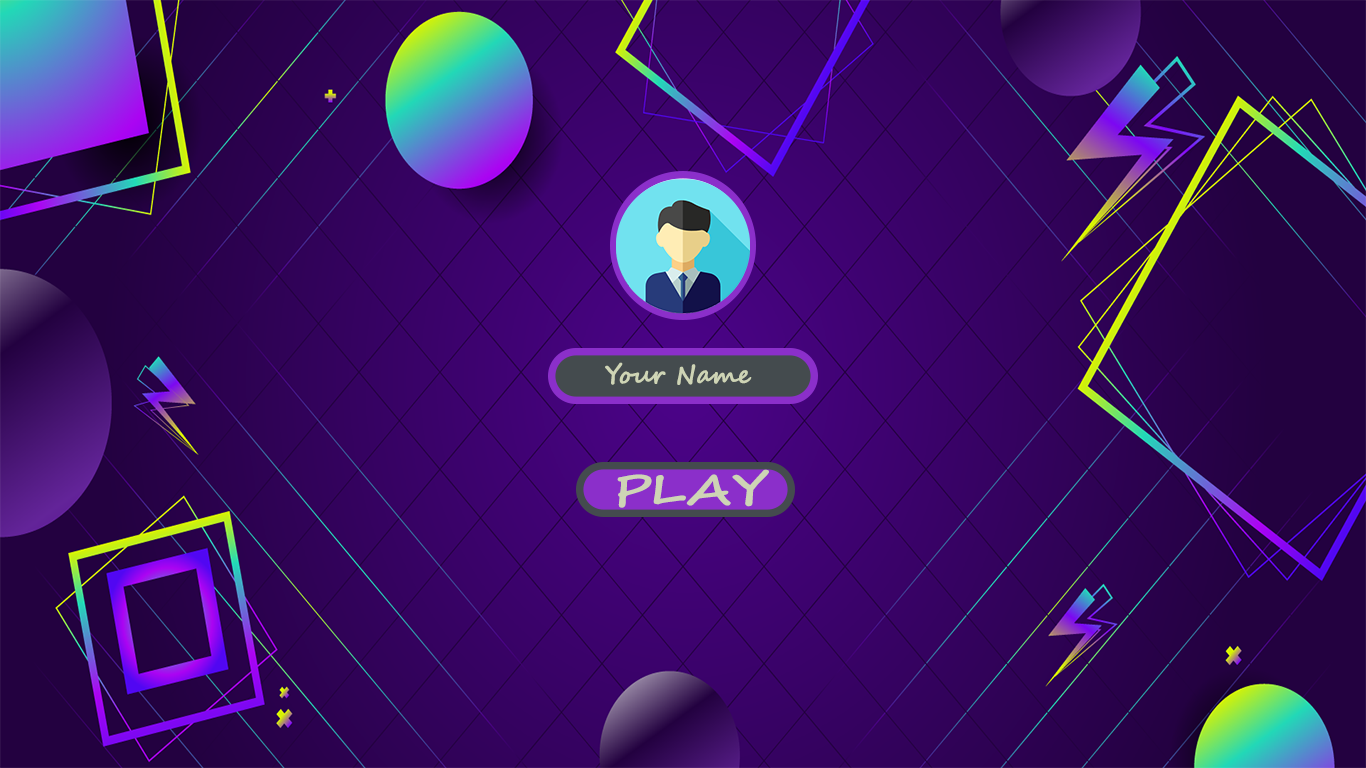
<style>
.page{position:relative;width:1366px;height:768px}
.page>*{position:absolute;margin:0}
.t1{font:25px "SegoeScript-Bold";color:#ced4b5}
.t2{font:41.7px "SegoeScript-Bold";color:#ced4b5;scale:1.28 1}
</style>
<div class="page">
<p class="t1" style="left:605px;top:362px;width:147px;height:23px">Your Name</p>
<p class="t2" style="left:617px;top:469px;width:152px;height:39px">PLAY</p>
</div>
